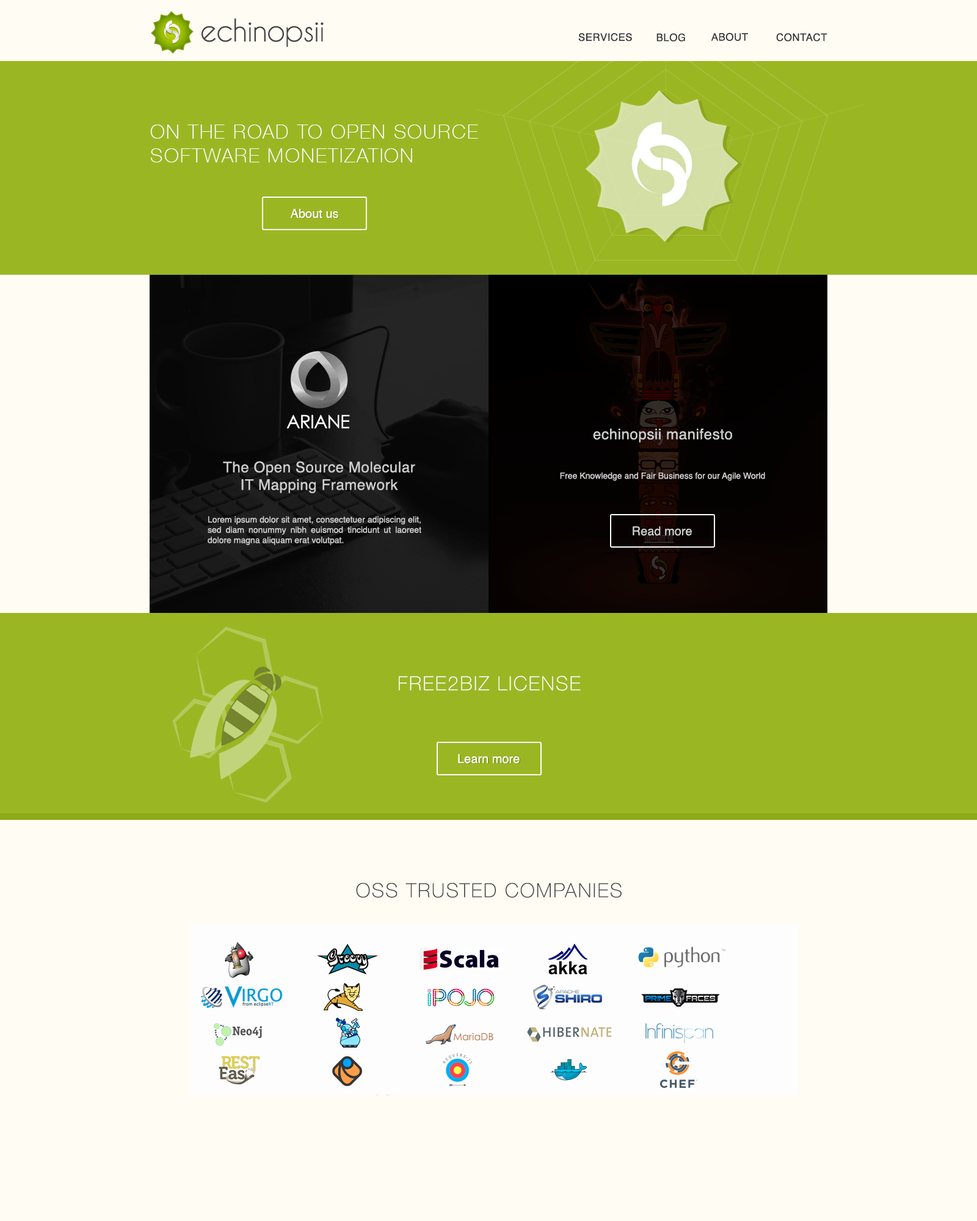
<style>
.page{position:relative;width:977px;height:1221px;background:#fffcf4}
.page>*{position:absolute;margin:0}
.t1{font:29.3px "CaviarDreams";letter-spacing:-0.025em;color:#474646}
.t2{font:10.4px "Helvetica";letter-spacing:0.025em;color:#333333;text-transform:uppercase}
.t3{font:19.5px "HelveticaNeue-Thin";letter-spacing:0.075em;color:#ffffff;text-transform:uppercase}
.t4{font:12.2px "Helvetica";color:#ffffff}
.t5{font:18.3px "CenturyGothic";letter-spacing:-0.025em;color:#fffefe}
.t6{font:14.7px "Helvetica";letter-spacing:0.025em;color:#cecece}
.t7{font:8.5px "Helvetica";color:#cecece}
.t8{font:12.2px "Helvetica";color:#cecece}
.t9{font:19.5px "HelveticaNeue-Thin";letter-spacing:0.075em;color:#474646;text-transform:uppercase}
</style>
<div class="page">
<p class="t1" style="left:201px;top:18px;width:123px;height:29px">echinopsii</p>
<p class="t2" style="left:578px;top:33px;width:54px;height:9px">Services</p>
<p class="t2" style="left:656px;top:33px;width:29px;height:9px">Blog</p>
<p class="t2" style="left:711px;top:33px;width:37px;height:8px">About</p>
<p class="t2" style="left:776px;top:33px;width:51px;height:9px">Contact</p>
<p class="t3" style="left:150px;top:125px;width:328px;height:37px">On the road to open source<br>software monetization</p>
<p class="t4" style="left:290px;top:209px;width:48px;height:9px">About us</p>
<p class="t5" style="left:286px;top:414px;width:64px;height:15px">ARIANE</p>
<p class="t6" style="left:593px;top:429px;width:139px;height:14px">echinopsii manifesto</p>
<p class="t6" style="left:223px;top:461px;width:192px;height:32px;text-align:center">The Open Source Molecular<br>IT Mapping Framework</p>
<p class="t7" style="left:560px;top:472px;width:205px;height:9px">Free Knowledge and Fair Business for our Agile World</p>
<p class="t7" style="left:208px;top:516px;width:213px;height:29px;text-align:justify">Lorem ipsum dolor sit amet, consectetuer adipiscing elit, sed diam nonummy nibh euismod tincidunt ut laoreet dolore magna aliquam erat volutpat.</p>
<p class="t8" style="left:632px;top:526px;width:60px;height:10px">Read more</p>
<p class="t3" style="left:399px;top:676px;width:182px;height:15px">Free2Biz License</p>
<p class="t4" style="left:458px;top:754px;width:61px;height:10px">Learn more</p>
<p class="t9" style="left:356px;top:883px;width:265px;height:15px">OSS Trusted companies</p>
</div>
